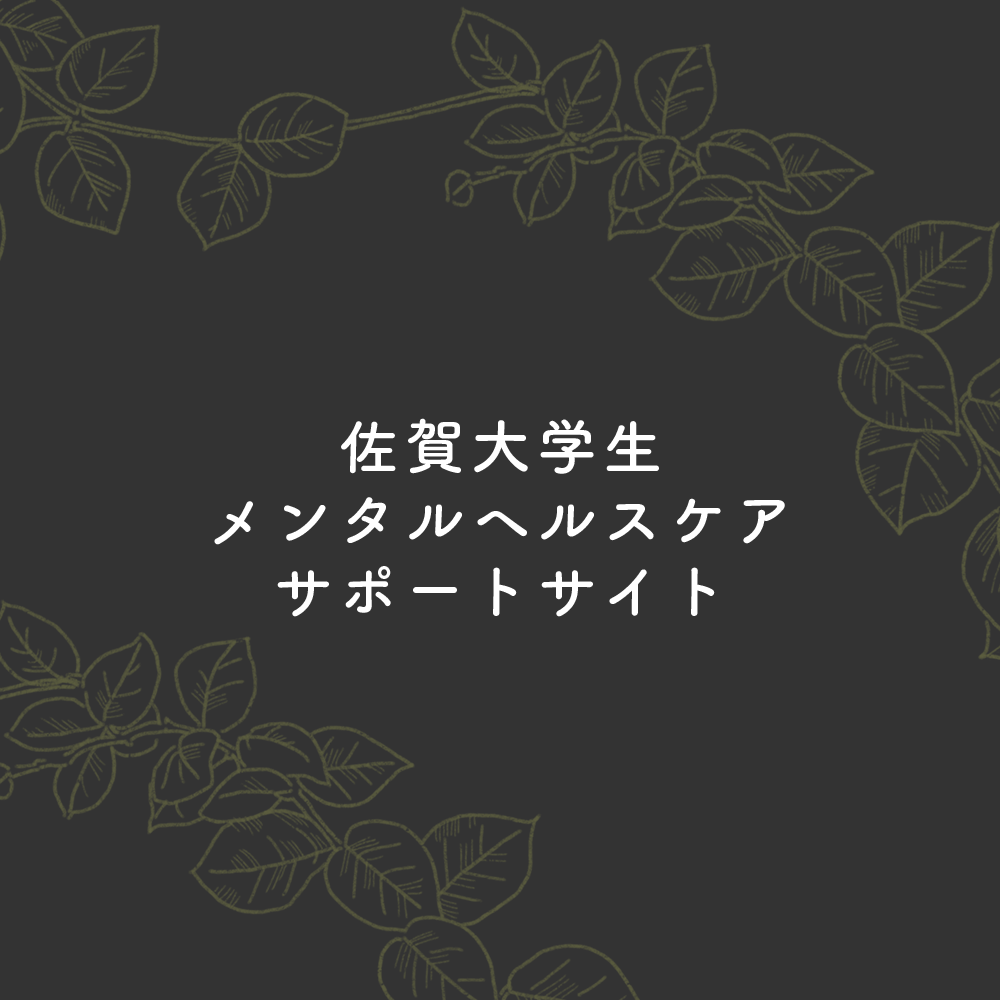
<style>
.page{position:relative;width:1000px;height:1000px;background:#333333}
.page>*{position:absolute;margin:0}
.t1{font:60px/72px "TsukuARdGothic-Bold";letter-spacing:0.1em;color:#ffffff}
</style>
<div class="page">
<p class="t1" style="left:214px;top:418px;width:571px;height:199px;text-align:center">佐賀大学生<br>メンタルヘルスケア<br>サポートサイト</p>
</div>
